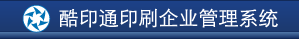
<style>
.page{position:relative;width:299px;height:39px}
.page>*{position:absolute;margin:0}
.t1{font:20px "STXihei";color:#ffffff}
</style>
<div class="page">
<p class="t1" style="left:59px;top:8px;width:219px;height:20px">酷印通印刷企业管理系统</p>
</div>
